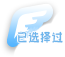
<style>
.page{position:relative;width:65px;height:57px;background:#ffffff}
.page>*{position:absolute;margin:0}
.t1{font:7.4px "shetumodengxiaofangti";color:#6eb5eb;scale:0.94 1}
</style>
<div class="page">
<p class="t1" style="left:17px;top:31px;width:46px;height:12px">已选择过</p>
</div>
